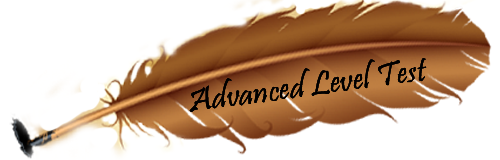
<style>
.page{position:relative;width:500px;height:160px;background:#ffffff}
.page>*{position:absolute;margin:0}
.t1{font:33.8px "Pristina-Regular";color:#010000;scale:1.08 1}
</style>
<div class="page">
<p class="t1" style="left:189px;top:58px;width:238px;height:54px;rotate:-8deg">Advanced Level Test</p>
<p class="t1" style="left:189px;top:58px;width:238px;height:54px;rotate:-8deg">Advanced Level Test</p>
<p class="t1" style="left:189px;top:58px;width:238px;height:54px;rotate:-8deg">Advanced Level Test</p>
</div>
